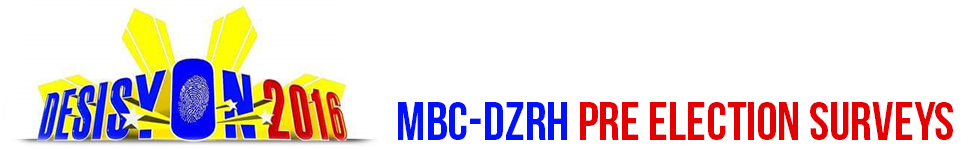
<style>
.page{position:relative;width:980px;height:150px;background:#ffffff}
.page>*{position:absolute;margin:0}
.t1{font:53.9px "BebasNeue";color:#e20002;text-transform:uppercase}
.t2{font:53.9px "BebasNeue";color:#0312f5;text-transform:uppercase}
</style>
<div class="page">
<p class="t1" style="left:398px;top:102px;width:555px;height:38px"><span class="t2">MBC-DZRH </span>PRE ELECTION SURVEYS</p>
</div>
